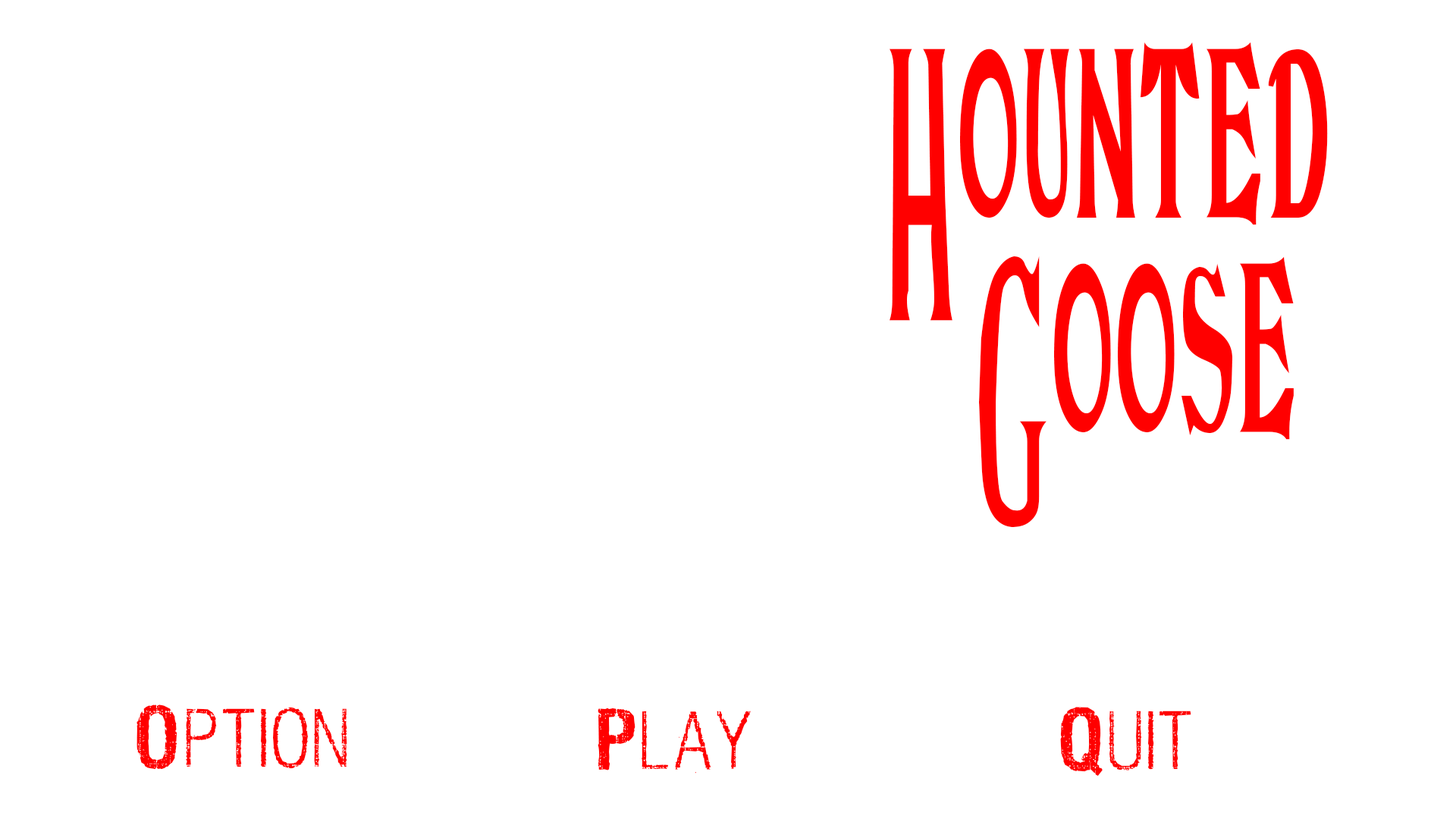
<style>
.page{position:relative;width:1456px;height:819px;background:#ffffff}
.page>*{position:absolute;margin:0}
.t1{font:178.8px "NiseTheDead";color:#ff0000}
.t2{font:94.8px "New";color:#ff0000}
</style>
<div class="page">
<p class="t1" style="left:890px;top:42px;width:438px;height:485px">Hounted<br> Goose</p>
<p class="t2" style="left:136px;top:704px;width:211px;height:66px">Option</p>
<p class="t2" style="left:598px;top:708px;width:153px;height:65px">Play</p>
<p class="t2" style="left:1060px;top:707px;width:131px;height:70px">Quit</p>
</div>
